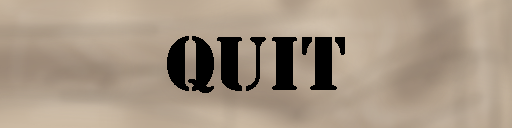
<style>
.page{position:relative;width:512px;height:128px}
.page>*{position:absolute;margin:0}
.t1{font:79.3px "Stencil";color:#000000}
</style>
<div class="page">
<p class="t1" style="left:167px;top:36px;width:178px;height:57px">Quit</p>
</div>
